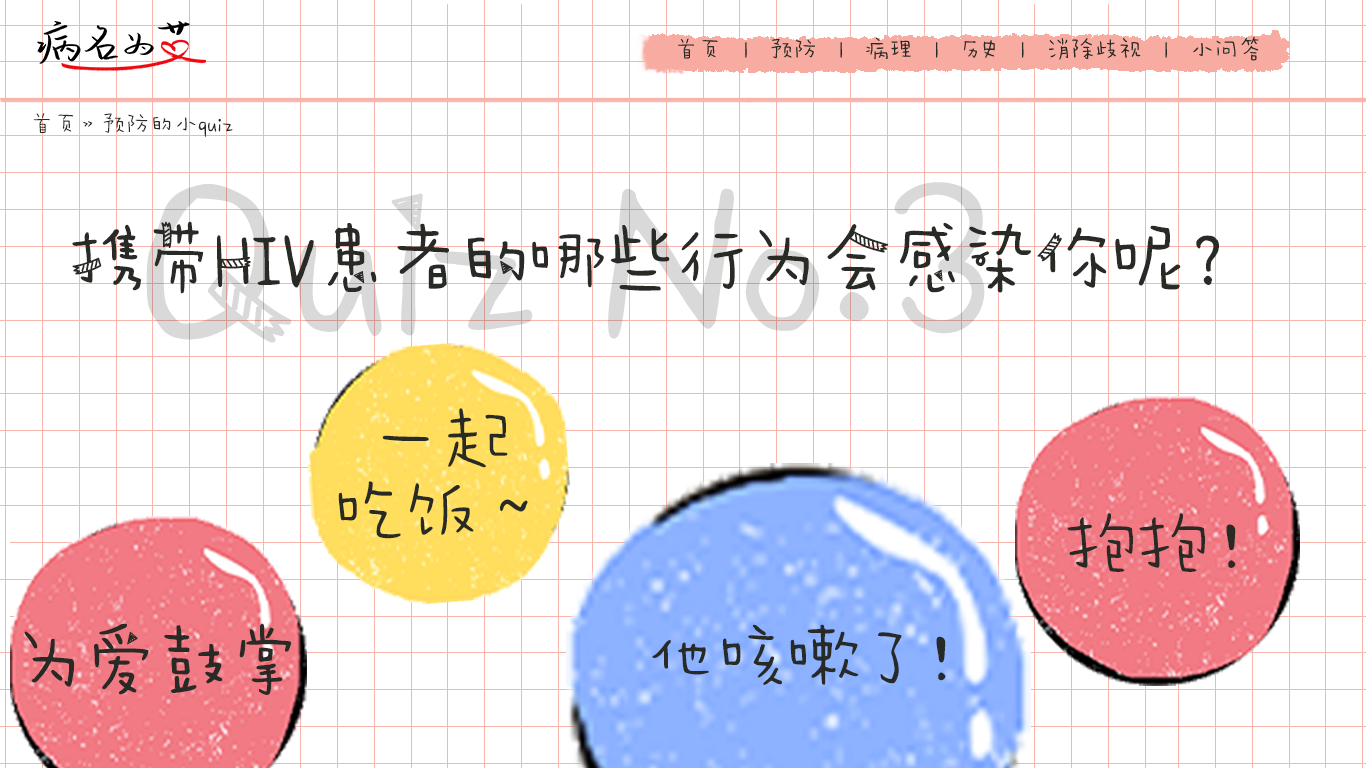
<style>
.page{position:relative;width:1366px;height:768px;background:#ffffff}
.page>*{position:absolute;margin:0}
.t1{font:24px "AaWanWan";color:#282a26}
.t2{font:72px "AaPaperTape";color:#282a26}
.t3{font:72px/72px "AaWanWan";color:#282a26}
.t4{font:72px "AaWanWan";color:#282a26}
</style>
<div class="page">
<p class="t1" style="left:33px;top:113px;width:200px;height:25px">首页》预防的小quiz</p>
<p class="t2" style="left:72px;top:221px;width:1147px;height:73px">携带HIV患者的哪些行为会感染你呢？</p>
<p class="t3" style="left:338px;top:408px;width:190px;height:131px;text-align:center">一起<br>吃饭～</p>
<p class="t4" style="left:1067px;top:513px;width:169px;height:59px">抱抱！</p>
<p class="t2" style="left:24px;top:623px;width:267px;height:72px">为爱鼓掌</p>
<p class="t4" style="left:652px;top:624px;width:294px;height:61px">他咳嗽了！</p>
</div>
